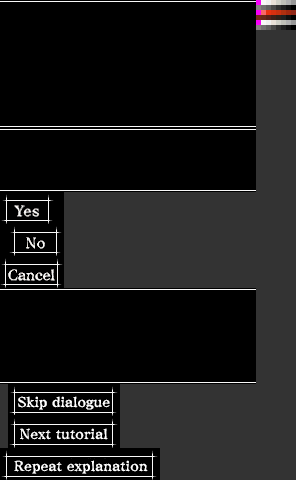
<style>
.page{position:relative;width:296px;height:480px;background:#000000}
.page>*{position:absolute;margin:0}
.t1{font:14px/32px "ComicMysteryStd-DB";color:#ffffff}
.t2{font:14px/32px "ComicMysteryStd-DB";letter-spacing:-0.01em;color:#ffffff}
</style>
<div class="page">
<p class="t1" style="left:14px;top:396px;width:134px;height:78px;text-align:center"><span class="t2">Skip dialogue<br></span>Next tutorial<br>        Repeat explanation</p>
</div>
